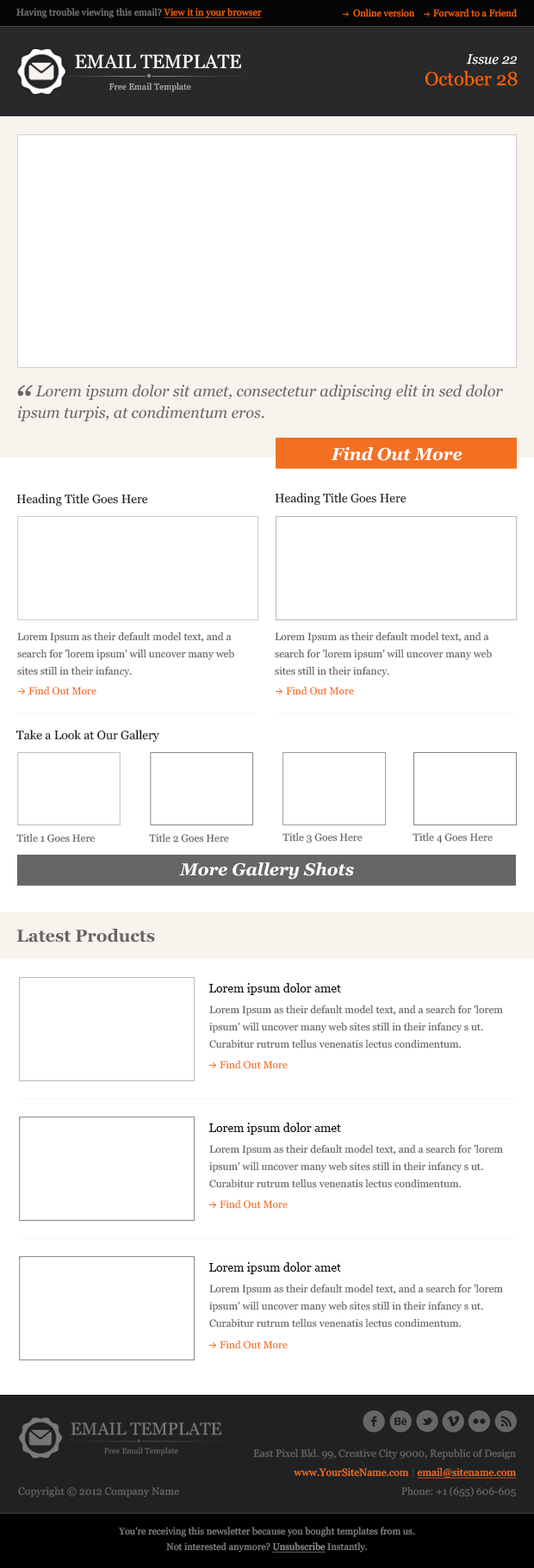
<style>
.page{position:relative;width:534px;height:1568px;background:#ffffff}
.page>*{position:absolute;margin:0}
.t1{font:9.5px "Georgia";color:#797a7a}
.t2{font:9.5px "Georgia";color:#ff6000;text-decoration:underline}
.t3{font:9.5px "Georgia";color:#ff6000}
.t4{font:13.8px "Georgia-Italic";color:#ffffff}
.t5{font:18.9px "Georgia";color:#ffffff}
.t6{font:19px "Georgia";color:#ff6000}
.t7{font:8.6px "Georgia";letter-spacing:0.015em;color:#aaabab}
.t8{font:15.5px/21.5px "Georgia-Italic";color:#656363}
.t9{font:17.2px "Georgia-BoldItalic";color:#ffffff}
.t10{font:12.1px "Georgia";color:#1a1a1a}
.t11{font:10.3px/17.2px "Georgia";color:#656363}
.t12{font:10.3px "Georgia";color:#f37021}
.t13{font:10.3px "Georgia";color:#656363}
.t14{font:17.2px "Georgia-Bold";color:#656363}
.t15{font:10.3px/19px "Georgia";color:#656363}
.t16{font:10.3px/19px "Georgia";color:#f37021}
.t17{font:10.3px/19px "Georgia";color:#414141}
.t18{font:10.3px/19px "Georgia";color:#f37021;text-decoration:underline}
.t19{font:10.3px "Georgia";letter-spacing:0.01em;color:#656363}
.t20{font:9.5px/15.5px "Georgia";color:#808080}
.t21{font:9.5px/15.5px "Georgia";color:#969696;text-decoration:underline}
</style>
<div class="page">
<p class="t1" style="left:16px;top:8px;width:246px;height:10px">Having trouble viewing this email? <span class="t2">View it in your browser</span></p>
<p class="t3" style="left:353px;top:9px;width:61px;height:8px"><span class="t1"><br></span>Online version</p>
<p class="t3" style="left:433px;top:9px;width:85px;height:8px">Forward to a Friend</p>
<p class="t4" style="left:466px;top:53px;width:51px;height:12px">Issue 22</p>
<p class="t5" style="left:75px;top:54px;width:166px;height:15px">EMAIL TEMPLATE</p>
<p class="t6" style="left:425px;top:71px;width:93px;height:15px">October 28</p>
<p class="t7" style="left:109px;top:83px;width:82px;height:9px">Free Email Template</p>
<p class="t8" style="left:17px;top:384px;width:486px;height:38px">Lorem ipsum dolor sit amet, consectetur adipiscing elit in sed dolor ipsum turpis, at condimentum eros.</p>
<p class="t9" style="left:331px;top:447px;width:132px;height:14px">Find Out More</p>
<p class="t10" style="left:16px;top:494px;width:132px;height:13px">Heading Title Goes Here</p>
<p class="t10" style="left:275px;top:493px;width:132px;height:13px">Heading Title Goes Here</p>
<p class="t11" style="left:17px;top:632px;width:217px;height:45px">Lorem Ipsum as their default model text, and a search for 'lorem ipsum' will uncover many web sites still in their infancy.</p>
<p class="t11" style="left:275px;top:632px;width:217px;height:45px">Lorem Ipsum as their default model text, and a search for 'lorem ipsum' will uncover many web sites still in their infancy.</p>
<p class="t12" style="left:28px;top:686px;width:68px;height:9px">Find Out More</p>
<p class="t12" style="left:286px;top:686px;width:68px;height:9px">Find Out More</p>
<p class="t10" style="left:16px;top:730px;width:143px;height:13px">Take a Look at Our Gallery</p>
<p class="t13" style="left:16px;top:833px;width:79px;height:10px">Title 1 Goes Here</p>
<p class="t13" style="left:149px;top:833px;width:80px;height:10px">Title 2 Goes Here</p>
<p class="t13" style="left:283px;top:832px;width:80px;height:11px">Title 3 Goes Here</p>
<p class="t13" style="left:413px;top:832px;width:80px;height:11px">Title 4 Goes Here</p>
<p class="t9" style="left:179px;top:862px;width:175px;height:18px">More Gallery Shots</p>
<p class="t14" style="left:16px;top:929px;width:139px;height:14px">Latest Products</p>
<p class="t10" style="left:209px;top:983px;width:132px;height:12px">Lorem ipsum dolor amet</p>
<p class="t11" style="left:209px;top:1005px;width:294px;height:43px">Lorem Ipsum as their default model text, and a search for 'lorem ipsum' will uncover many web sites still in their infancy s ut. Curabitur rutrum tellus venenatis lectus condimentum.</p>
<p class="t12" style="left:220px;top:1060px;width:68px;height:9px">Find Out More</p>
<p class="t10" style="left:209px;top:1123px;width:132px;height:12px">Lorem ipsum dolor amet</p>
<p class="t11" style="left:209px;top:1144px;width:294px;height:44px">Lorem Ipsum as their default model text, and a search for 'lorem ipsum' will uncover many web sites still in their infancy s ut. Curabitur rutrum tellus venenatis lectus condimentum.</p>
<p class="t12" style="left:220px;top:1199px;width:68px;height:10px">Find Out More</p>
<p class="t10" style="left:209px;top:1262px;width:132px;height:12px">Lorem ipsum dolor amet</p>
<p class="t11" style="left:209px;top:1284px;width:294px;height:44px">Lorem Ipsum as their default model text, and a search for 'lorem ipsum' will uncover many web sites still in their infancy s ut. Curabitur rutrum tellus venenatis lectus condimentum.</p>
<p class="t12" style="left:220px;top:1340px;width:68px;height:9px">Find Out More</p>
<p class="t15" style="left:253px;top:1448px;width:264px;height:49px;text-align:right">East Pixel Bld. 99, Creative City 9000, Republic of Design<br><span class="t16">www.YourSiteName.com </span><span class="t17">| </span><span class="t18">email@sitename.com<br></span>Phone: +1 (655) 606-605</p>
<p class="t19" style="left:18px;top:1486px;width:161px;height:11px">Copyright © 2012 Company Name</p>
<p class="t20" style="left:119px;top:1527px;width:296px;height:25px;text-align:center">You're receiving this newsletter because you bought templates from us.<br>Not interested anymore? <span class="t21">Unsubscribe</span> Instantly.</p>
</div>
